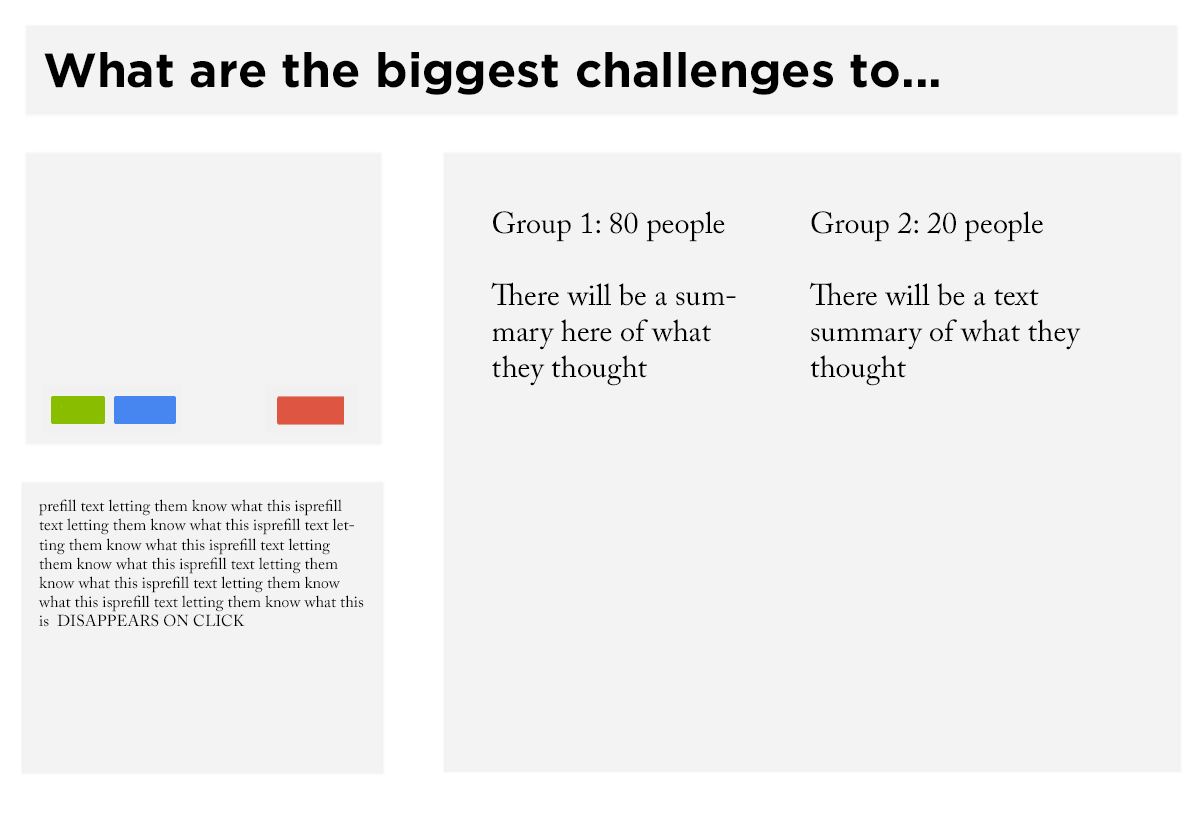
<style>
.page{position:relative;width:1200px;height:823px;background:#f3f3f3}
.page>*{position:absolute;margin:0}
.t1{font:48px "GothamBold";color:#000000}
.t2{font:16px "ACaslonPro-Regular";color:#000000}
</style>
<div class="page">
<p class="t1" style="left:44px;top:52px;width:895px;height:43px">What are the biggest challenges to...</p>
<p class="t2" style="left:38px;top:499px;width:326px;height:128px">prefill text letting them know what this isprefill text letting them know what this isprefill text letting them know what this isprefill text letting them know what this isprefill text letting them know what this isprefill text letting them know what this isprefill text letting them know what this is  DISAPPEARS ON CLICK</p>
</div>
